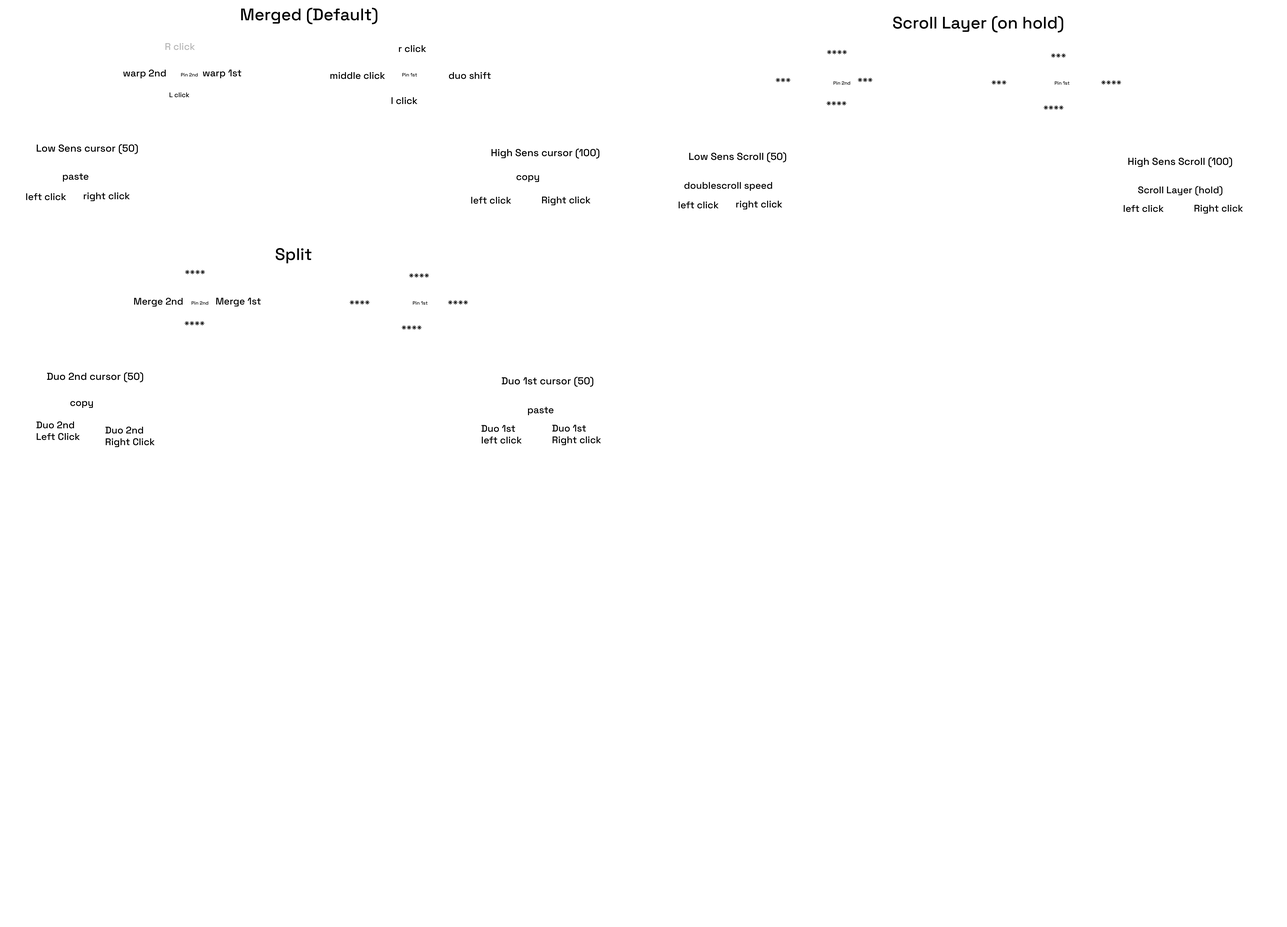
<style>
.page{position:relative;width:1287px;height:927px;background:#ffffff}
.page>*{position:absolute;margin:0}
.t1{font:16.7px "SpaceGrotesk-Medium";color:#000000}
.t2{font:9.7px "SpaceGrotesk-Medium";color:#b8b8b8}
.t3{font:9.7px "SpaceGrotesk-Medium";color:#000000}
.t4{font:4.8px "SpaceGrotesk-Medium";color:#000000}
.t5{font:6.7px "SpaceGrotesk-Medium";color:#000000}
.t6{font:10.1px "SpaceGrotesk-Medium";color:#000000}
</style>
<div class="page">
<p class="t1" style="left:241px;top:8px;width:136px;height:16px">Merged (Default)</p>
<p class="t1" style="left:893px;top:16px;width:170px;height:17px">Scroll Layer (on hold)</p>
<p class="t2" style="left:165px;top:43px;width:30px;height:7px">R click</p>
<p class="t3" style="left:399px;top:45px;width:27px;height:7px">r click</p>
<p class="t3" style="left:827px;top:50px;width:20px;height:4px">****</p>
<p class="t3" style="left:1051px;top:53px;width:15px;height:5px">***</p>
<p class="t3" style="left:123px;top:69px;width:43px;height:9px">warp 2nd</p>
<p class="t4" style="left:181px;top:73px;width:17px;height:4px">Pin 2nd</p>
<p class="t3" style="left:203px;top:69px;width:38px;height:9px">warp 1st</p>
<p class="t3" style="left:330px;top:72px;width:55px;height:7px">middle click</p>
<p class="t4" style="left:402px;top:73px;width:15px;height:4px">Pin 1st</p>
<p class="t3" style="left:449px;top:72px;width:42px;height:7px">duo shift</p>
<p class="t3" style="left:776px;top:78px;width:14px;height:4px">***</p>
<p class="t3" style="left:858px;top:78px;width:14px;height:4px">***</p>
<p class="t4" style="left:833px;top:81px;width:17px;height:4px">Pin 2nd</p>
<p class="t3" style="left:991px;top:80px;width:15px;height:5px">***</p>
<p class="t4" style="left:1055px;top:81px;width:14px;height:4px">Pin 1st</p>
<p class="t3" style="left:1101px;top:80px;width:20px;height:5px">****</p>
<p class="t5" style="left:170px;top:92px;width:19px;height:5px">L click</p>
<p class="t3" style="left:391px;top:97px;width:26px;height:7px">l click</p>
<p class="t3" style="left:826px;top:101px;width:20px;height:5px">****</p>
<p class="t3" style="left:1043px;top:105px;width:20px;height:5px">****</p>
<p class="t6" style="left:37px;top:144px;width:101px;height:10px">Low Sens cursor (50)</p>
<p class="t6" style="left:491px;top:148px;width:108px;height:11px">High Sens cursor (100)</p>
<p class="t6" style="left:689px;top:152px;width:97px;height:10px">Low Sens Scroll (50)</p>
<p class="t6" style="left:1128px;top:157px;width:104px;height:10px">High Sens Scroll (100)</p>
<p class="t3" style="left:63px;top:173px;width:25px;height:9px">paste</p>
<p class="t3" style="left:516px;top:175px;width:23px;height:7px">copy</p>
<p class="t3" style="left:684px;top:182px;width:88px;height:9px">doublescroll speed</p>
<p class="t3" style="left:1138px;top:186px;width:84px;height:10px">Scroll Layer (hold)</p>
<p class="t3" style="left:26px;top:193px;width:40px;height:7px">left click</p>
<p class="t3" style="left:84px;top:192px;width:46px;height:9px">right click</p>
<p class="t3" style="left:471px;top:197px;width:40px;height:7px">left click</p>
<p class="t3" style="left:542px;top:196px;width:48px;height:9px">Right click</p>
<p class="t3" style="left:679px;top:201px;width:39px;height:7px">left click</p>
<p class="t3" style="left:736px;top:201px;width:46px;height:8px">right click</p>
<p class="t3" style="left:1124px;top:205px;width:39px;height:7px">left click</p>
<p class="t3" style="left:1194px;top:205px;width:49px;height:8px">Right click</p>
<p class="t1" style="left:276px;top:248px;width:35px;height:15px">Split</p>
<p class="t3" style="left:185px;top:270px;width:20px;height:4px">****</p>
<p class="t3" style="left:409px;top:273px;width:20px;height:5px">****</p>
<p class="t3" style="left:134px;top:298px;width:49px;height:8px">Merge 2nd</p>
<p class="t4" style="left:192px;top:301px;width:16px;height:4px">Pin 2nd</p>
<p class="t3" style="left:216px;top:298px;width:45px;height:8px">Merge 1st</p>
<p class="t3" style="left:350px;top:300px;width:19px;height:5px">****</p>
<p class="t4" style="left:413px;top:301px;width:15px;height:4px">Pin 1st</p>
<p class="t3" style="left:448px;top:300px;width:20px;height:5px">****</p>
<p class="t3" style="left:185px;top:321px;width:19px;height:4px">****</p>
<p class="t3" style="left:402px;top:325px;width:19px;height:5px">****</p>
<p class="t6" style="left:47px;top:372px;width:96px;height:10px">Duo 2nd cursor (50)</p>
<p class="t6" style="left:502px;top:377px;width:91px;height:10px">Duo 1st cursor (50)</p>
<p class="t3" style="left:70px;top:401px;width:23px;height:7px">copy</p>
<p class="t3" style="left:528px;top:407px;width:25px;height:8px">paste</p>
<p class="t3" style="left:36px;top:421px;width:44px;height:19px">Duo 2nd<br>Left Click</p>
<p class="t3" style="left:481px;top:425px;width:41px;height:18px">Duo 1st<br>left click</p>
<p class="t3" style="left:552px;top:425px;width:49px;height:20px">Duo 1st<br>Right click</p>
<p class="t3" style="left:105px;top:426px;width:50px;height:21px">Duo 2nd<br>Right Click</p>
</div>
